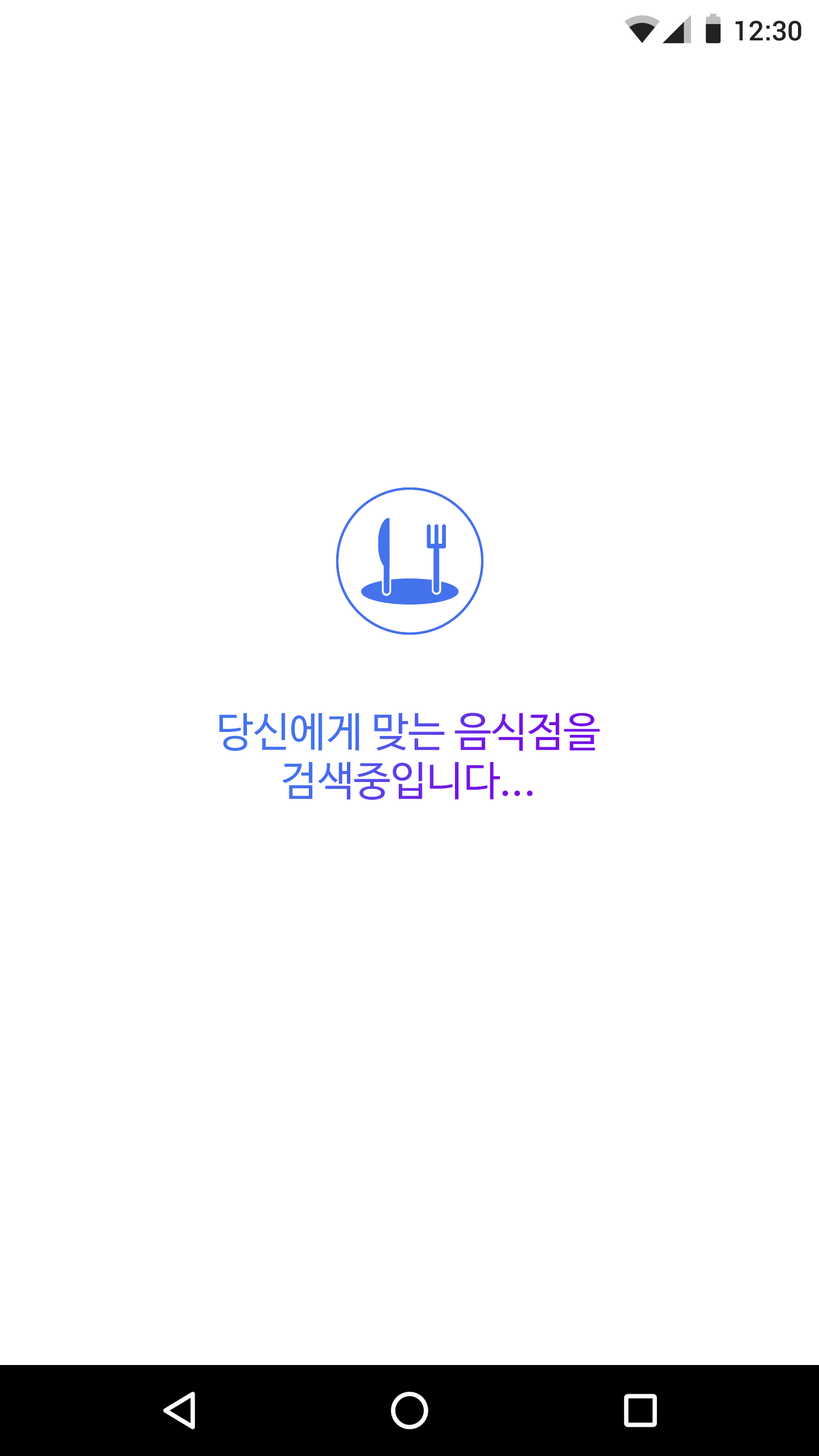
<style>
.page{position:relative;width:819px;height:1456px;background:#ffffff}
.page>*{position:absolute;margin:0}
.t1{font:27.3px "Roboto-Medium";color:#222222}
.t2{font:40.9px "NanumBarunGothic"}
</style>
<div class="page">
<p class="t1" style="left:735px;top:20px;width:66px;height:21px">12:30</p>
<p class="t2" style="left:219px;top:713px;width:381px;height:87px;text-align:center">당신에게 맞는 음식점을<br>검색중입니다...</p>
</div>
